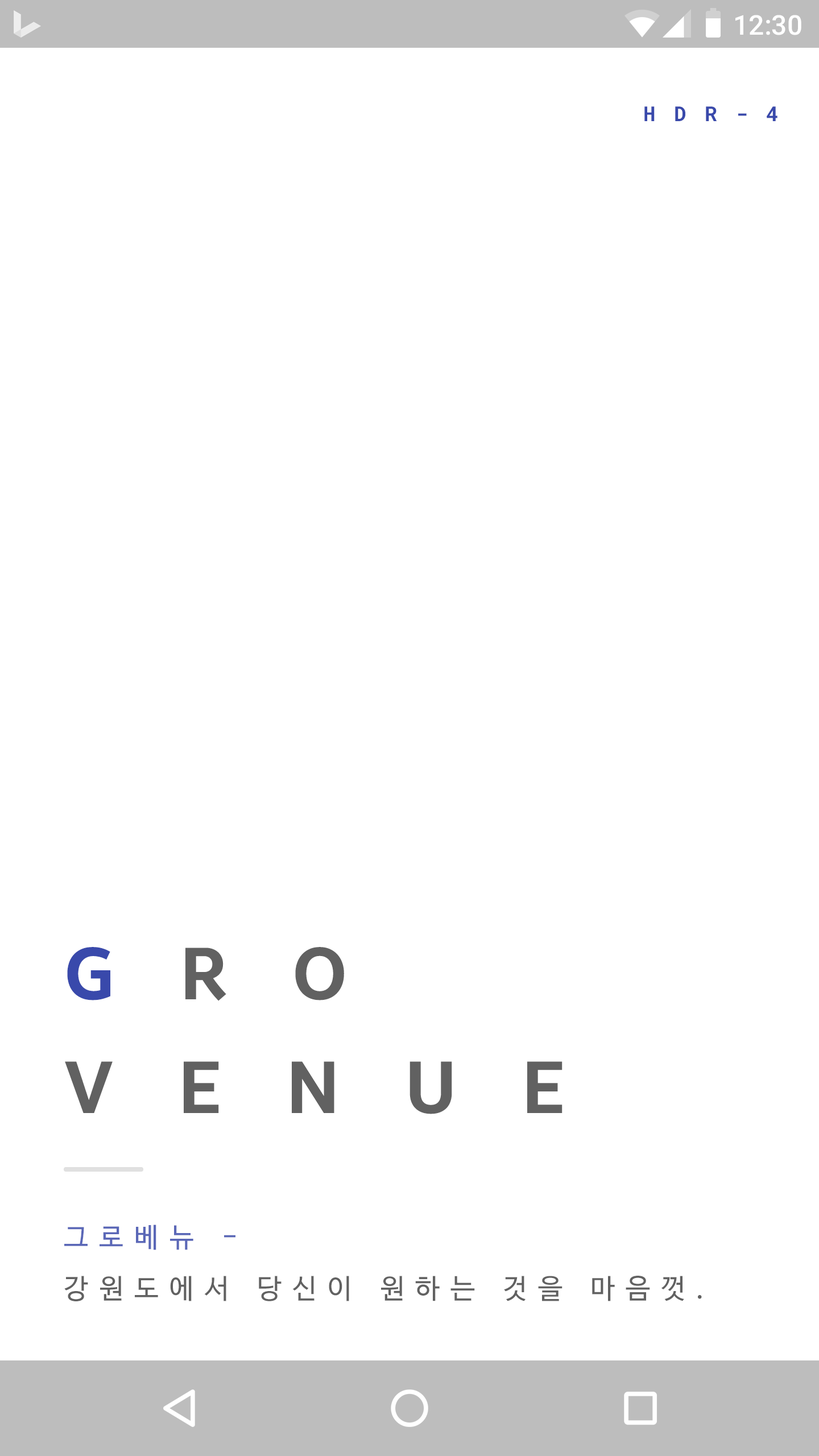
<style>
.page{position:relative;width:819px;height:1456px;background:#ffffff}
.page>*{position:absolute;margin:0}
.t1{font:27.3px "Roboto-Medium";color:#ffffff}
.t2{font:20.5px "RobotoMono-Bold";letter-spacing:0.9em;color:#3949ab}
.t3{font:72.8px/113.7px "BreezeSans-Bold";letter-spacing:0.9em;color:#616161}
.t4{font:72.8px/113.7px "BreezeSans-Bold";letter-spacing:0.9em;color:#3949ab}
.t5{font:27.3px/51.2px "NanumBarunGothic";letter-spacing:0.4em;color:#616161}
.t6{font:27.3px/51.2px "NanumBarunGothic";letter-spacing:0.4em;color:#5a67b7}
</style>
<div class="page">
<p class="t1" style="left:735px;top:15px;width:66px;height:20px">12:30</p>
<p class="t2" style="left:644px;top:106px;width:133px;height:15px">HDR-4</p>
<p class="t3" style="left:65px;top:947px;width:497px;height:167px"><span class="t4">G</span>RO<br>VENUE</p>
<p class="t5" style="left:64px;top:1225px;width:638px;height:76px"><span class="t6">그로베뉴 - <br></span>강원도에서 당신이 원하는 것을 마음껏.</p>
</div>
